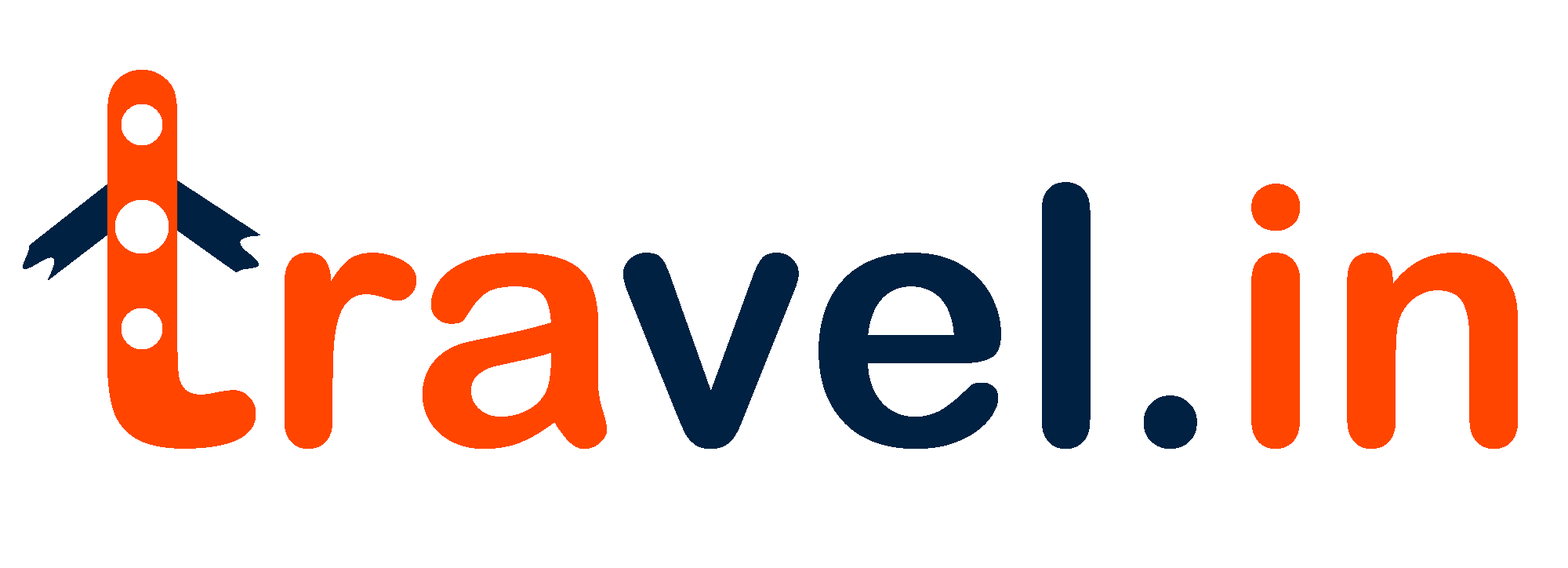
<style>
.page{position:relative;width:1568px;height:568px;background:#ffffff}
.page>*{position:absolute;margin:0}
.t1{font:359.3px "ArialRoundedMTBold";color:#002142}
.t2{font:359.3px "ArialRoundedMTBold";color:#ff4500}
</style>
<div class="page">
<p class="t1" style="left:285px;top:182px;width:1233px;height:266px"><span class="t2">ra</span>vel.<span class="t2">in</span></p>
</div>
